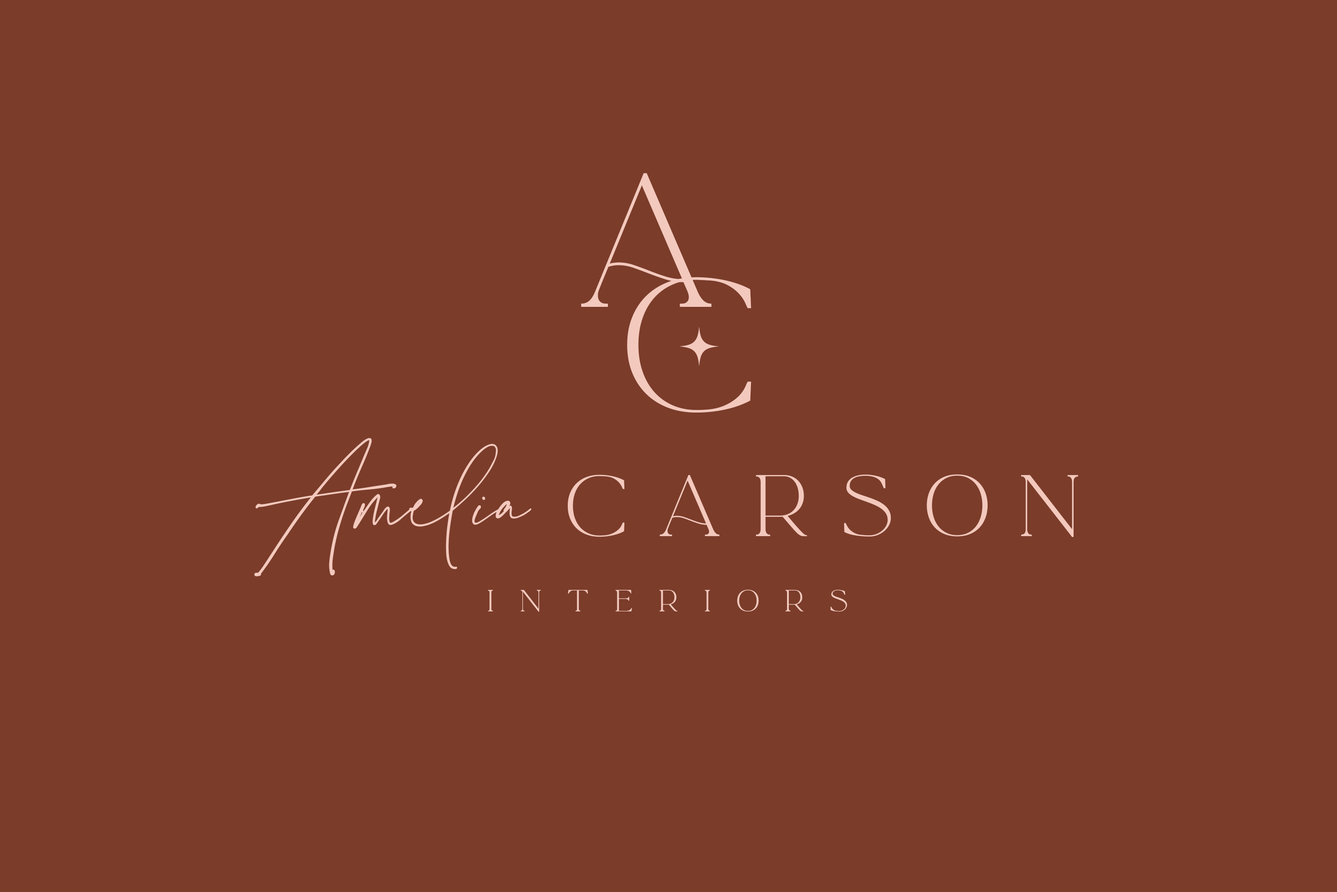
<style>
.page{position:relative;width:1337px;height:892px;background:#7b3c2a}
.page>*{position:absolute;margin:0}
.t1{font:166.8px "LaLuxesSerif";color:#f4c9bd}
.t2{font:98.7px "LaLuxesSerif";color:#f4c9bd}
.t3{font:143.6px "LaLuxesScript";color:#f4c9bd}
.t4{font:76.1px "LaLuxesSerif";letter-spacing:0.4em;color:#f4c9bd}
.t5{font:26.6px "LaLuxesSerif";letter-spacing:0.94em;color:#f4c9bd}
</style>
<div class="page">
<p class="t1" style="left:581px;top:173px;width:131px;height:134px">a</p>
<p class="t1" style="left:627px;top:277px;width:125px;height:135px">c</p>
<p class="t2" style="left:679px;top:326px;width:40px;height:40px">*</p>
<p class="t3" style="left:254px;top:438px;width:278px;height:138px">Amelia</p>
<p class="t4" style="left:568px;top:474px;width:510px;height:63px">carson</p>
<p class="t5" style="left:488px;top:589px;width:359px;height:23px">interiors</p>
</div>
